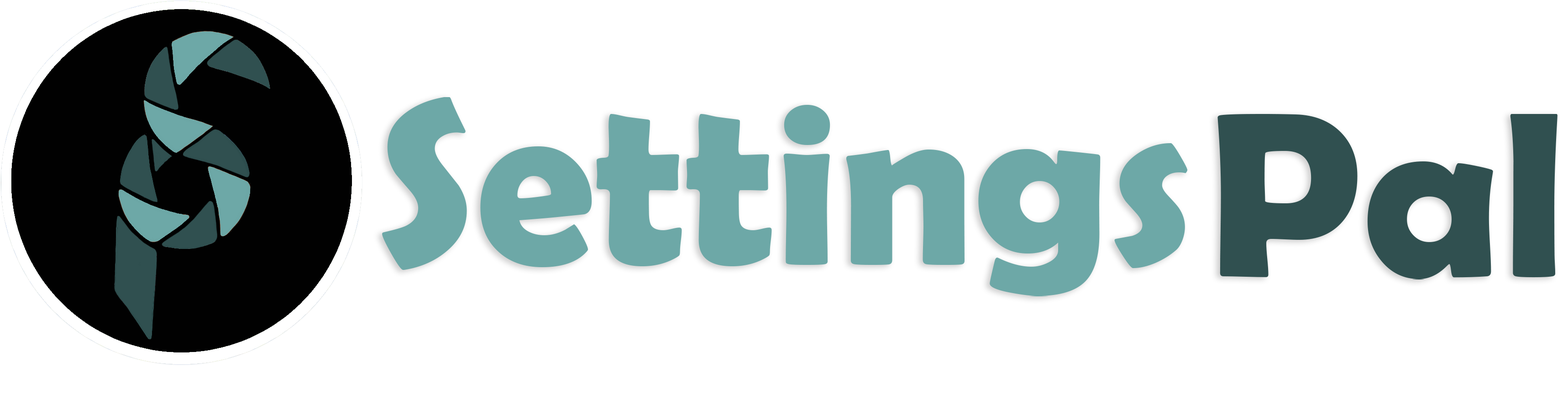
<style>
.page{position:relative;width:1568px;height:393px;background:#ffffff}
.page>*{position:absolute;margin:0}
.t1{font:237.5px "BerlinSansFBDemi-Bold";color:#6da8a7}
.t2{font:237.5px "BerlinSansFBDemi-Bold";color:#305050}
</style>
<div class="page">
<p class="t1" style="left:382px;top:97px;width:806px;height:200px">Settings</p>
<p class="t2" style="left:1217px;top:114px;width:341px;height:166px">Pal</p>
</div>
